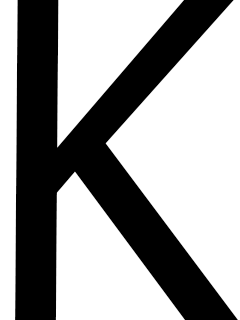
<style>
.page{position:relative;width:240px;height:320px;background:#ffffff}
.page>*{position:absolute;margin:0}
.t1{font:442.4px "Tahoma";color:#000000;scale:0.95 1}
</style>
<div class="page">
<p class="t1" style="left:15px;top:0px;width:224px;height:321px">K</p>
</div>
